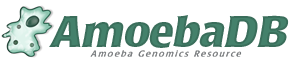
<style>
.page{position:relative;width:292px;height:70px;background:#ffffff}
.page>*{position:absolute;margin:0}
.t1{font:43.5px "PopplLaudatio-Bold";letter-spacing:-0.007em;color:#3f7863;font-style:italic}
</style>
<div class="page">
<p class="t1" style="left:49px;top:15px;width:240px;height:33px">AmoebaDB</p>
</div>
